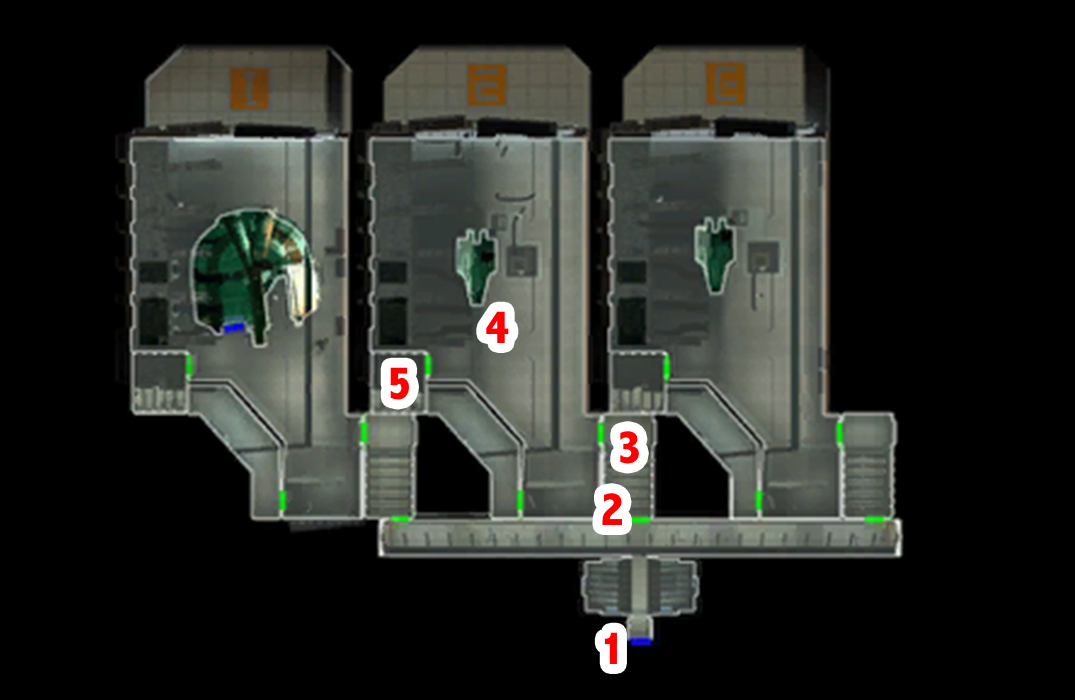
<style>
.page{position:relative;width:1075px;height:700px;background:#000000}
.page>*{position:absolute;margin:0}
.t1{font:48px "AbadiMT-CondensedExtraBold";color:#ff0000}
</style>
<div class="page">
<p class="t1" style="left:486px;top:311px;width:23px;height:32px">4</p>
<p class="t1" style="left:390px;top:367px;width:19px;height:33px">5</p>
<p class="t1" style="left:620px;top:431px;width:19px;height:33px">3</p>
<p class="t1" style="left:602px;top:493px;width:20px;height:32px">2</p>
<p class="t1" style="left:604px;top:632px;width:13px;height:32px">1</p>
</div>
